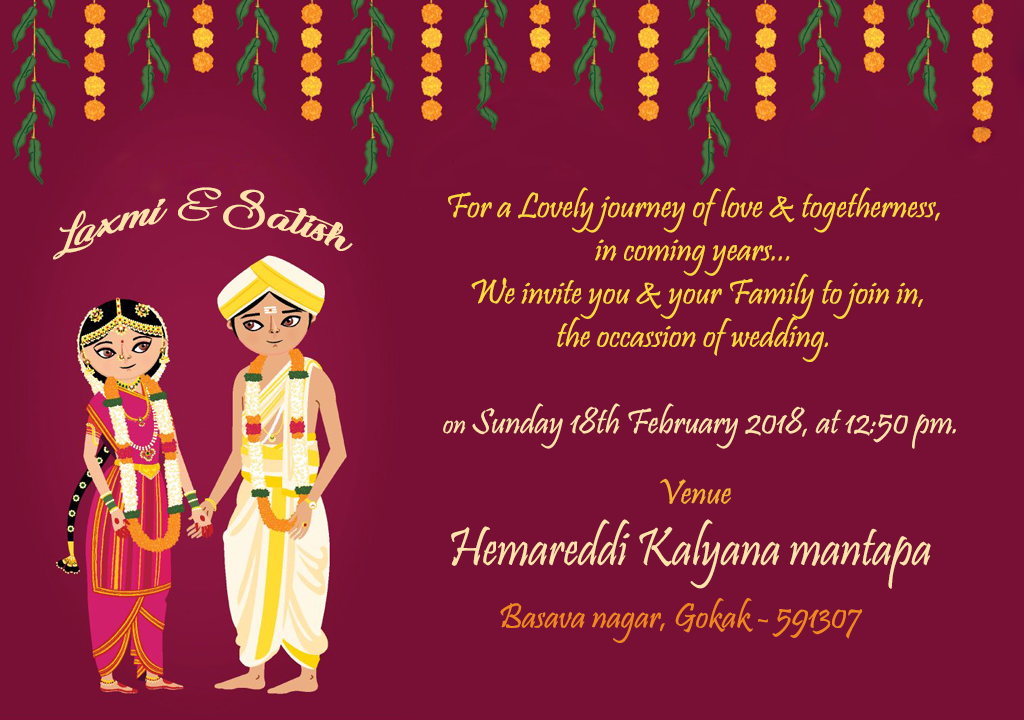
<style>
.page{position:relative;width:1024px;height:720px;background:#781035}
.page>*{position:absolute;margin:0}
.t1{font:72px "Special-Valentine";color:#ffe3ab}
.t2{font:72px "Pictorial-Signature";color:#ffe3ab}
.t3{font:36px "Pristina-Regular";color:#fed93c}
.t4{font:36px "Pristina-Regular";color:#ffe3ab}
.t5{font:30px "Pristina-Regular";color:#ffe3ab}
.t6{font:36px "Pristina-Regular";color:#f6b132}
.t7{font:55.2px "Pristina-Regular";color:#ffe3ab;scale:0.9 1}
.t8{font:36px "Pristina-Regular";color:#f2871d}
</style>
<div class="page">
<p class="t1" style="left:53px;top:187px;width:300px;height:73px">Laxmi <span class="t2">&amp;</span>Satish</p>
<p class="t3" style="left:448px;top:187px;width:492px;height:175px;text-align:center">For a Lovely journey of love &amp; togetherness,<br>in coming years...<br> We invite you &amp; your Family to join in,<br>the occassion of wedding.</p>
<p class="t4" style="left:443px;top:403px;width:513px;height:46px"><span class="t5">on </span>Sunday 18th February 2018, at 12:50 pm.</p>
<p class="t6" style="left:660px;top:478px;width:71px;height:26px">Venue</p>
<p class="t7" style="left:451px;top:519px;width:480px;height:70px">Hemareddi Kalyana mantapa</p>
<p class="t8" style="left:500px;top:598px;width:363px;height:45px">Basava nagar, Gokak - 591307</p>
</div>
